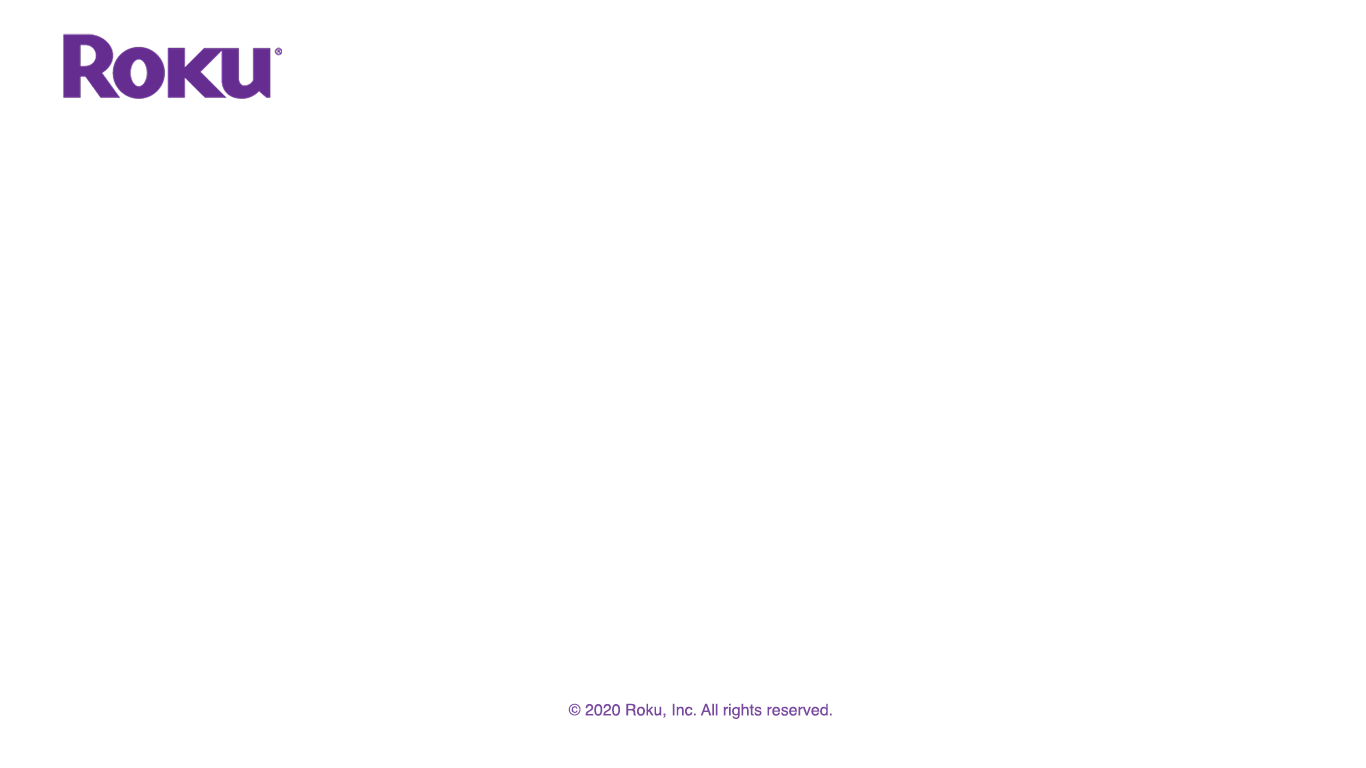
<style>
.page{position:relative;width:1366px;height:768px;background:#ffffff}
.page>*{position:absolute;margin:0}
.t1{font:16px "Helvetica";color:#7a48a1}
</style>
<div class="page">
<p class="t1" style="left:568px;top:703px;width:264px;height:16px">© 2020 Roku, Inc. All rights reserved.</p>
</div>
